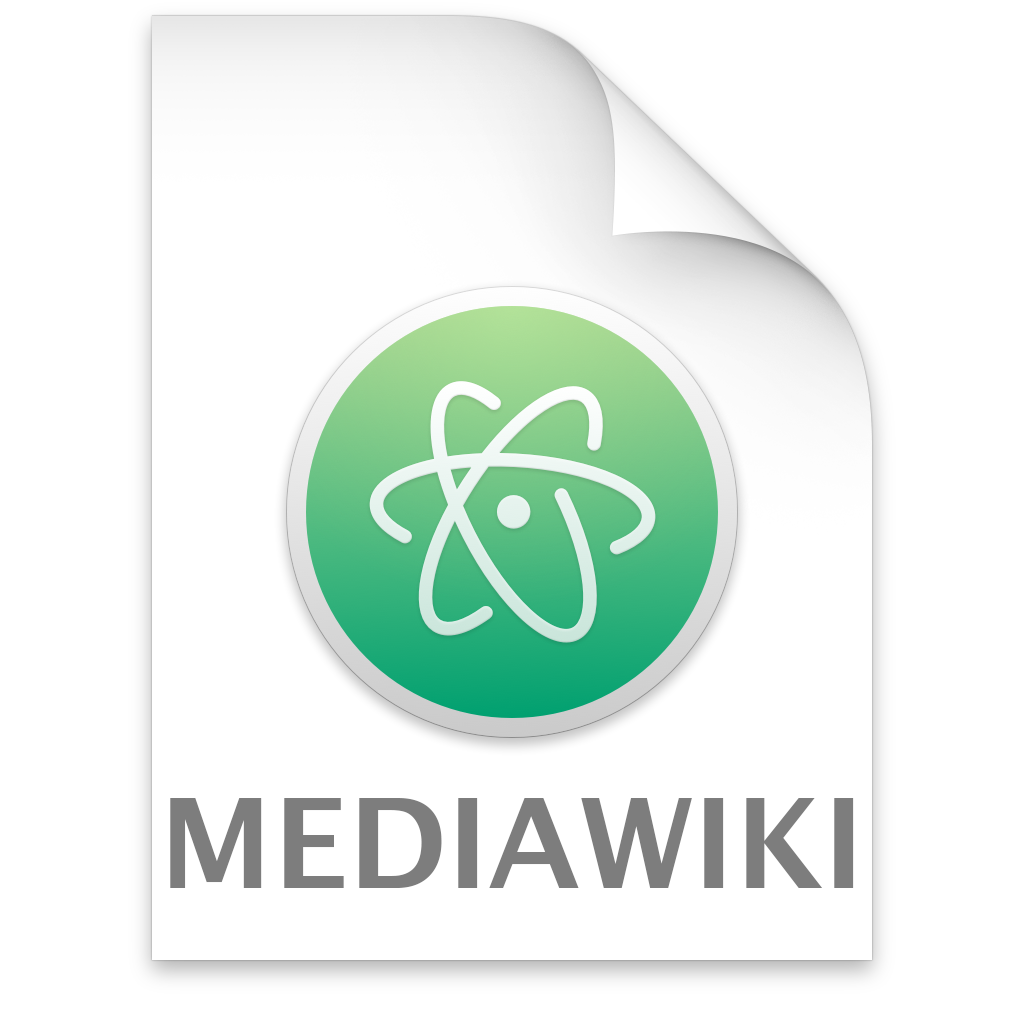
<style>
.page{position:relative;width:1024px;height:1024px;background:#ffffff}
.page>*{position:absolute;margin:0}
.t1{font:125px "LucidaGrande-Bold";color:#7d7d7d}
</style>
<div class="page">
<p class="t1" style="left:170px;top:798px;width:684px;height:90px">MEDIAWIKI</p>
</div>
